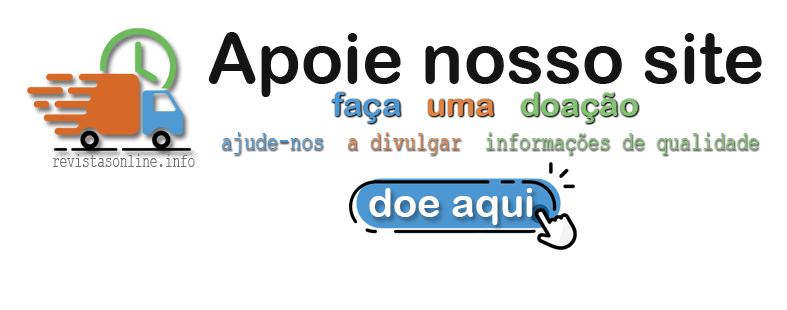
<style>
.page{position:relative;width:787px;height:310px;background:#ffffff}
.page>*{position:absolute;margin:0}
.t1{font:70px "ArialRoundedMTBold";color:#141414}
.t2{font:33px "ArialRoundedMTBold";color:#81c570}
.t3{font:33px "ArialRoundedMTBold";color:#4e99d3}
.t4{font:33px "ArialRoundedMTBold";color:#e18241}
.t5{font:25.9px "CourierNewPSMT";color:#81c570;scale:0.74 1}
.t6{font:25.9px "CourierNewPSMT";color:#4e99d3;scale:0.74 1}
.t7{font:25.9px "CourierNewPSMT";color:#e18241;scale:0.74 1}
.t8{font:22.9px "CourierNewPSMT";color:#81c570;scale:0.74 1}
.t9{font:19.1px "CourierNewPSMT";color:#737373;scale:0.66 1}
.t10{font:40px "ArialRoundedMTBold";color:#ffffff}
</style>
<div class="page">
<p class="t1" style="left:208px;top:32px;width:554px;height:65px">Apoie nosso site</p>
<p class="t2" style="left:331px;top:92px;width:307px;height:31px"><span class="t3">faça   </span><span class="t4">uma   </span>doação</p>
<p class="t5" style="left:222px;top:132px;width:536px;height:22px"><span class="t6">ajude-nos  </span><span class="t7">a divulgar  </span>informações de qualidade de <span class="t8">qualidade</span></p>
<p class="t9" style="left:53px;top:154px;width:142px;height:13px">revistasonline.info</p>
<p class="t10" style="left:369px;top:188px;width:164px;height:37px">doe aqui</p>
</div>
